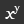
<style>
.page{position:relative;width:24px;height:24px;background:#333333}
.page>*{position:absolute;margin:0}
.t1{font:24px "Gabriola";color:#ffffff}
</style>
<div class="page">
<p class="t1" style="left:5px;top:6px;width:15px;height:13px">xy</p>
</div>
